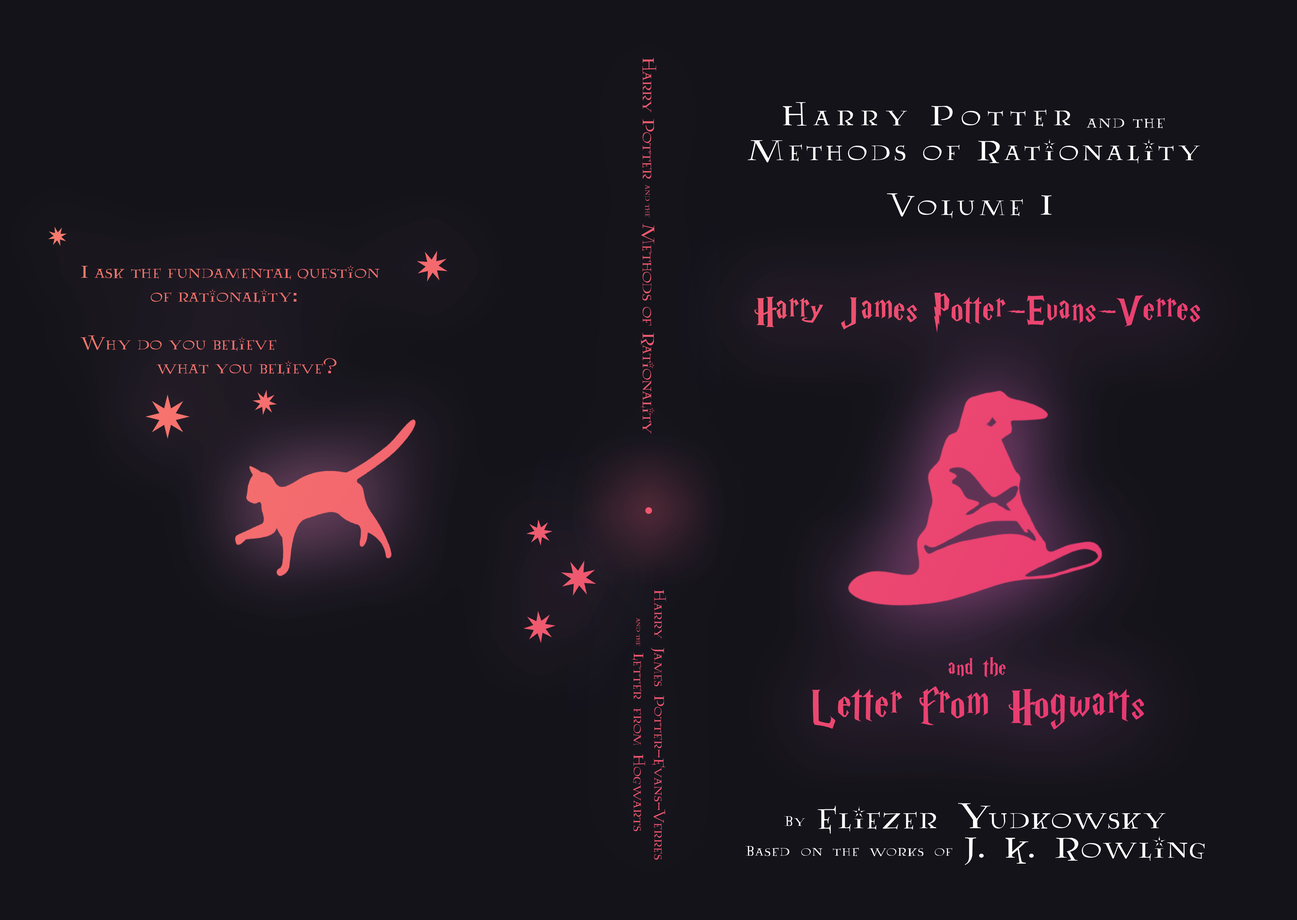
<style>
.page{position:relative;width:1297px;height:920px;background:#141319}
.page>*{position:absolute;margin:0}
.t1{font:18.7px "Lumos";color:#ef596f}
.t2{font:9.4px "Lumos";color:#ef596f}
.t3{font:32.2px/34.9px "Lumos";letter-spacing:0.1em;color:#ffffff}
.t4{font:32.2px/22.8px "Lumos";letter-spacing:0.2em;color:#ffffff}
.t5{font:19.9px/22.8px "Lumos";letter-spacing:0.05em;color:#ffffff}
.t6{font:32.2px "Lumos";letter-spacing:0.1em;color:#ffffff}
.t7{font:19.9px "Lumos";color:#f5736e}
.t8{font:41.4px/49.7px "HarryP";letter-spacing:0.025em;color:#ea4371}
.t9{font:26.5px/49.7px "HarryP";letter-spacing:0.025em;color:#ea4371}
.t10{font:49.7px/49.7px "HarryP";letter-spacing:0.025em;color:#ea4371}
.t11{font:15.9px/20.7px "AA-Lumos-Caps";color:#ef5670}
.t12{font:8px/15.6px "Lumos";color:#ef5670}
.t13{font:16.6px/29.5px "AA-Lumos-Caps";letter-spacing:0.05em;color:#ffffff}
.t14{font:33.1px/29.5px "AA-Lumos-Caps";letter-spacing:0.05em;color:#ffffff}
</style>
<div class="page">
<p class="t1" style="left:641px;top:58px;width:15px;height:376px;rotate:90deg">Harry Potter <span class="t2">and the </span>Methods of Rationality</p>
<p class="t3" style="left:747px;top:102px;width:453px;height:61px;text-align:center"><span class="t4">Harry Potter</span><span class="t5">  and the<br></span>Methods of Rationality</p>
<p class="t6" style="left:887px;top:193px;width:164px;height:25px">Volume I</p>
<p class="t7" style="left:80px;top:264px;width:299px;height:111px">I ask the fundamental question<br>            of rationality:<br><br>Why do you believe<br>             what you believe?</p>
<p class="t8" style="left:754px;top:292px;width:446px;height:437px;text-align:center">Harry James Potter-Evans-Verres<br><br><br><br><br><br><br><span class="t9">and the<br></span><span class="t10">Letter from Hogwarts</span></p>
<p class="t11" style="left:631px;top:589px;width:35px;height:270px;text-align:center;rotate:90deg">Harry James Potter-Evans-Verres<br><span class="t12">and the   </span>Letter from Hogwarts</p>
<p class="t13" style="left:745px;top:803px;width:459px;height:62px;text-align:center">By <span class="t14">Eliezer Yudkowsky<br></span>Based on the works of <span class="t14">J. K. Rowling</span></p>
</div>
